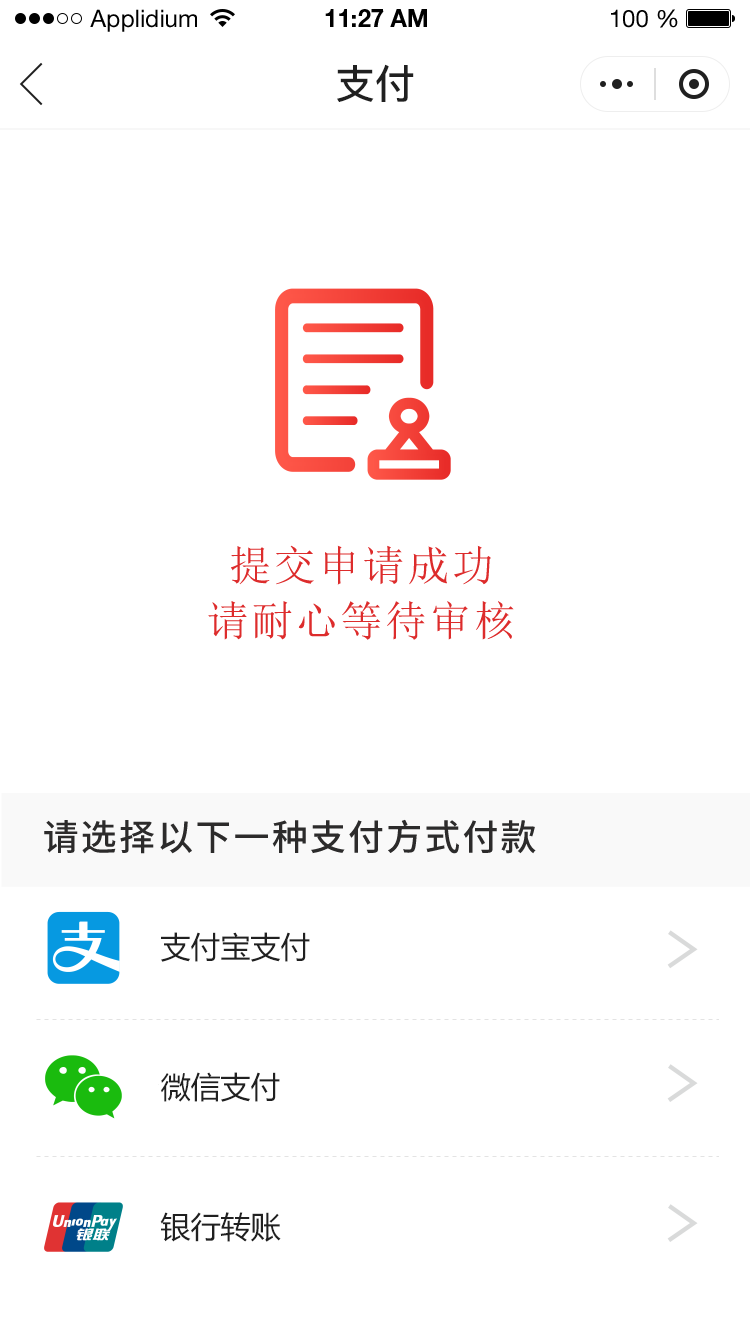
<style>
.page{position:relative;width:750px;height:1334px;background:#ffffff}
.page>*{position:absolute;margin:0}
.t1{font:24px "HelveticaNeueLTStd-Roman";color:#000000}
.t2{font:24px "HelveticaNeueLTStd-Bd";color:#000000}
.t3{font:40px "PingFang-SC-Bold";color:#202020;text-transform:uppercase}
.t4{font:30px "MicrosoftYaHei";color:#202020;text-transform:uppercase}
</style>
<div class="page">
<p class="t1" style="left:90px;top:9px;width:107px;height:23px">Applidium</p>
<p class="t2" style="left:325px;top:9px;width:102px;height:18px">11:27 AM</p>
<p class="t1" style="left:611px;top:9px;width:67px;height:19px">100 %</p>
<p class="t3" style="left:337px;top:64px;width:77px;height:38px">支付</p>
<p class="t4" style="left:161px;top:932px;width:149px;height:30px">支付宝支付</p>
<p class="t4" style="left:161px;top:1072px;width:119px;height:30px">微信支付</p>
<p class="t4" style="left:160px;top:1212px;width:121px;height:30px">银行转账</p>
</div>
